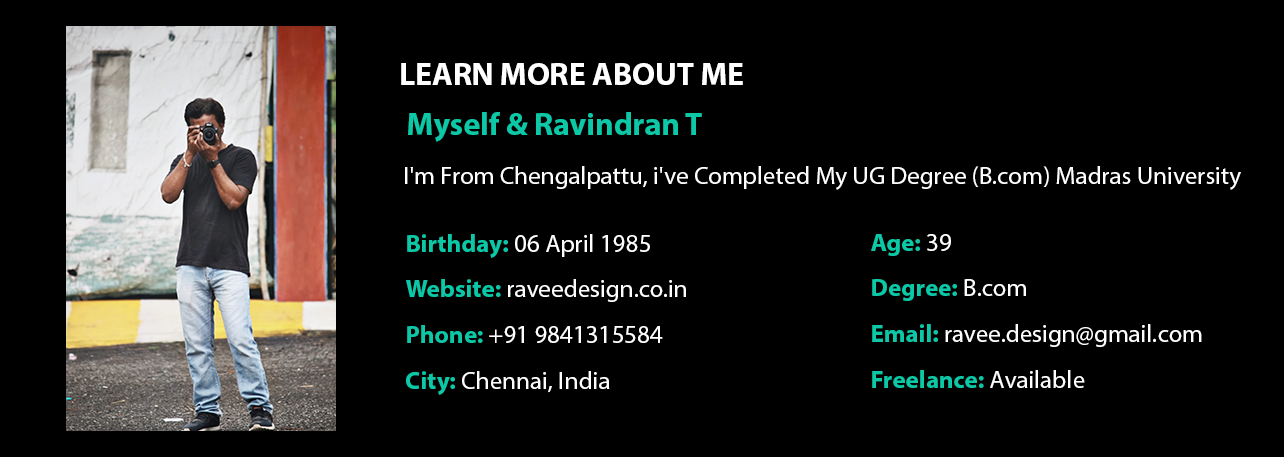
<style>
.page{position:relative;width:1284px;height:457px;background:#000000}
.page>*{position:absolute;margin:0}
.t1{font:31.8px "MyriadPro-Bold";color:#ffffff}
.t2{font:31.8px "MyriadPro-Bold";color:#0cc8a7}
.t3{font:25px "MyriadPro-Regular";color:#ffffff}
.t4{font:25px/45.8px "MyriadPro-Regular";color:#ffffff}
.t5{font:25px/45.8px "MyriadPro-Bold";color:#0cc8a7}
</style>
<div class="page">
<p class="t1" style="left:401px;top:63px;width:342px;height:22px">LEARN MORE ABOUT ME</p>
<p class="t2" style="left:408px;top:112px;width:294px;height:30px">Myself &amp; Ravindran T</p>
<p class="t3" style="left:405px;top:166px;width:836px;height:24px">I'm From Chengalpattu, i've Completed My UG Degree (B.com) Madras University</p>
<p class="t4" style="left:406px;top:234px;width:280px;height:161px"><span class="t5">Birthday: </span>06 April 1985<br><span class="t5">Website: </span>raveedesign.co.in<br><span class="t5">Phone: </span>+91 9841315584<br><span class="t5">City: </span>Chennai, India</p>
<p class="t4" style="left:871px;top:234px;width:331px;height:154px"><span class="t5">Age: </span>39<br><span class="t5">Degree: </span>B.com<br><span class="t5">Email: </span>ravee.design@gmail.com<br><span class="t5">Freelance: </span>Available</p>
</div>
